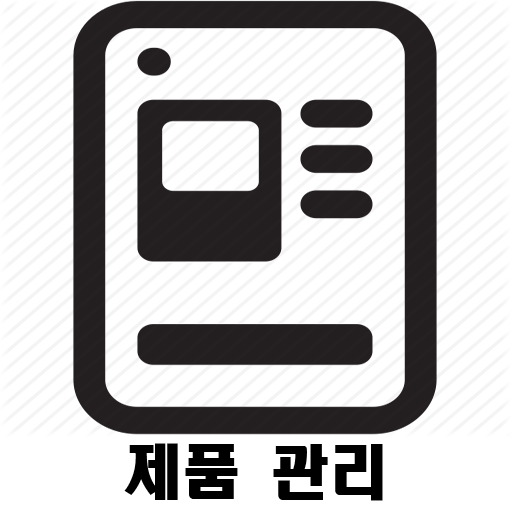
<style>
.page{position:relative;width:511px;height:511px;background:#ffffff}
.page>*{position:absolute;margin:0}
.t1{font:58.8px "HeadlineR-HM";color:#000000}
</style>
<div class="page">
<p class="t1" style="left:124px;top:443px;width:259px;height:58px">제품 관리</p>
</div>
